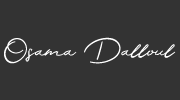
<style>
.page{position:relative;width:180px;height:100px;background:#333333}
.page>*{position:absolute;margin:0}
.t1{font:41.7px "LasAntonio";color:#ffffff}
</style>
<div class="page">
<p class="t1" style="left:4px;top:37px;width:172px;height:27px">Osama Dalloul</p>
</div>
